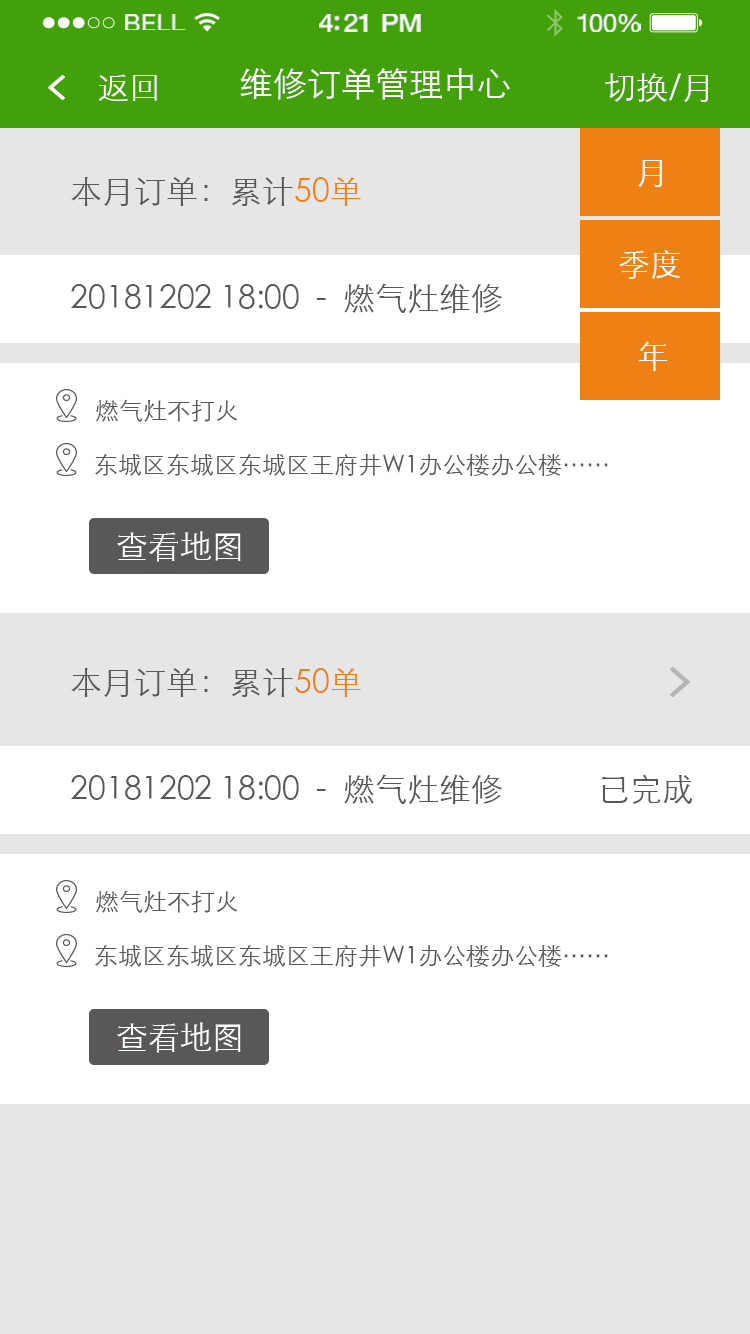
<style>
.page{position:relative;width:750px;height:1334px;background:#ffffff}
.page>*{position:absolute;margin:0}
.t1{font:23.3px "HelveticaNeue";letter-spacing:0.02em;color:#ffffff;scale:1.06 1}
.t2{font:25.3px "HelveticaNeue-Medium";letter-spacing:-0.02em;color:#ffffff;scale:1.06 1}
.t3{font:24.3px "HelveticaNeue";letter-spacing:-0.02em;color:#ffffff;scale:1.06 1}
.t4{font:32px "STXihei";color:#ffffff}
.t5{font:34px "STXihei";color:#ffffff}
.t6{font:32px "STXihei";color:#595757}
.t7{font:32px "STXihei";color:#ef8013}
.t8{font:24px "STXihei";color:#595757}
</style>
<div class="page">
<p class="t1" style="left:125px;top:14px;width:61px;height:16px">BELL</p>
<p class="t2" style="left:319px;top:14px;width:102px;height:18px">4:21 PM</p>
<p class="t3" style="left:577px;top:14px;width:64px;height:18px">100%</p>
<p class="t4" style="left:98px;top:74px;width:59px;height:27px">返回</p>
<p class="t5" style="left:240px;top:68px;width:270px;height:32px">维修订单管理中心</p>
<p class="t4" style="left:605px;top:73px;width:103px;height:29px">切换/月</p>
<p class="t4" style="left:638px;top:160px;width:24px;height:27px">月</p>
<p class="t6" style="left:71px;top:177px;width:290px;height:29px">本月订单：累计<span class="t7">50单</span></p>
<p class="t4" style="left:619px;top:250px;width:61px;height:29px">季度</p>
<p class="t6" style="left:71px;top:283px;width:431px;height:30px">20181202 18:00  -  燃气灶维修</p>
<p class="t4" style="left:638px;top:341px;width:30px;height:30px">年</p>
<p class="t8" style="left:96px;top:399px;width:141px;height:23px">燃气灶不打火</p>
<p class="t8" style="left:95px;top:453px;width:513px;height:23px">东城区东城区东城区王府井W1办公楼办公楼……</p>
<p class="t4" style="left:117px;top:531px;width:124px;height:31px">查看地图</p>
<p class="t6" style="left:71px;top:668px;width:290px;height:29px">本月订单：累计<span class="t7">50单</span></p>
<p class="t6" style="left:71px;top:774px;width:431px;height:30px">20181202 18:00  -  燃气灶维修</p>
<p class="t6" style="left:602px;top:774px;width:91px;height:30px">已完成</p>
<p class="t8" style="left:96px;top:890px;width:141px;height:23px">燃气灶不打火</p>
<p class="t8" style="left:95px;top:944px;width:513px;height:23px">东城区东城区东城区王府井W1办公楼办公楼……</p>
<p class="t4" style="left:117px;top:1022px;width:124px;height:31px">查看地图</p>
</div>
